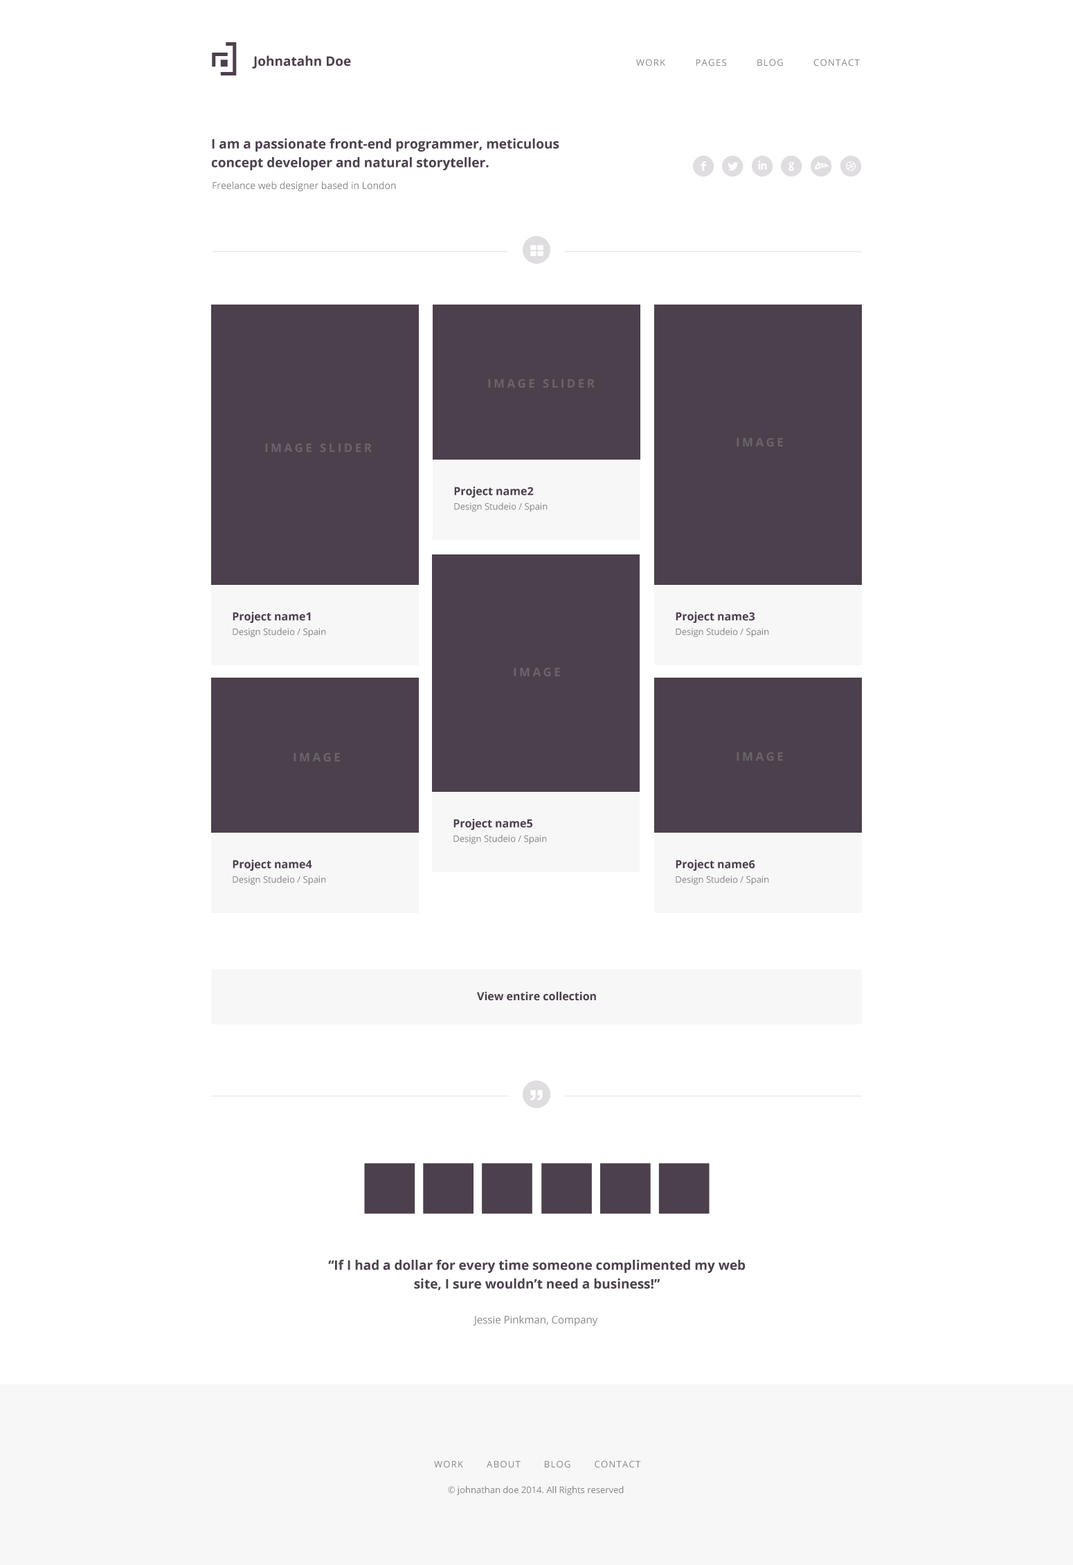
<style>
.page{position:relative;width:1073px;height:1565px;background:#ffffff}
.page>*{position:absolute;margin:0}
.t1{font:13.2px "OpenSans-Bold";color:#4c404d}
.t2{font:9px "OpenSans";letter-spacing:0.1em;color:#898889;text-transform:uppercase}
.t3{font:13.2px/18.7px "OpenSans-Bold";color:#4c404d}
.t4{font:9.7px "OpenSans";color:#898889}
.t5{font:9px/14.5px "OpenSans";color:#898889}
.t6{font:11.1px/18.7px "OpenSans-Bold";color:#4c404d}
.t7{font:11.1px "OpenSans-Bold";color:#4c404d}
.t8{font:33.2px "Swiss721BT-BlackCondensed";color:#ffffff}
.t9{font:10.4px "OpenSans";color:#898889}
.t10{font:9px "OpenSans";color:#898889}
</style>
<div class="page">
<p class="t1" style="left:252px;top:55px;width:99px;height:14px">Johnatahn Doe</p>
<p class="t2" style="left:636px;top:59px;width:224px;height:7px">worK         Pages         blog         contact</p>
<p class="t3" style="left:211px;top:138px;width:348px;height:32px">I am a passionate front-end programmer, meticulous concept developer and natural storyteller.</p>
<p class="t4" style="left:213px;top:181px;width:183px;height:11px">Freelance web designer based in London</p>
<p class="t5" style="left:454px;top:487px;width:94px;height:25px"><span class="t6">Project name2<br></span>Design Studeio / Spain</p>
<p class="t5" style="left:233px;top:612px;width:93px;height:26px"><span class="t6">Project name1<br></span>Design Studeio / Spain</p>
<p class="t5" style="left:676px;top:612px;width:93px;height:26px"><span class="t6">Project name3<br></span>Design Studeio / Spain</p>
<p class="t5" style="left:453px;top:819px;width:94px;height:26px"><span class="t6">Project name5<br></span>Design Studeio / Spain</p>
<p class="t5" style="left:233px;top:860px;width:93px;height:25px"><span class="t6">Project name4<br></span>Design Studeio / Spain</p>
<p class="t5" style="left:676px;top:860px;width:93px;height:25px"><span class="t6">Project name6<br></span>Design Studeio / Spain</p>
<p class="t7" style="left:477px;top:991px;width:119px;height:10px">View entire collection</p>
<p class="t8" style="left:530px;top:1090px;width:6px;height:11px;rotate:180deg">‘</p>
<p class="t8" style="left:537px;top:1090px;width:6px;height:11px;rotate:180deg">‘</p>
<p class="t3" style="left:328px;top:1260px;width:418px;height:30px;text-align:center">“If I had a dollar for every time someone complimented my web site, I sure wouldn’t need a business!”</p>
<p class="t9" style="left:473px;top:1315px;width:125px;height:11px">Jessie Pinkman, Company</p>
<p class="t2" style="left:434px;top:1461px;width:207px;height:7px">work       about       blog       contact</p>
<p class="t10" style="left:448px;top:1486px;width:176px;height:9px">© johnathan doe 2014. All Rights reserved</p>
</div>
